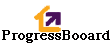
<style>
.page{position:relative;width:110px;height:54px;background:#ffffff}
.page>*{position:absolute;margin:0}
.t1{font:14px "BookmanOldStyle-Bold";color:#030000}
</style>
<div class="page">
<p class="t1" style="left:2px;top:30px;width:108px;height:13px">ProgressBooard</p>
</div>
